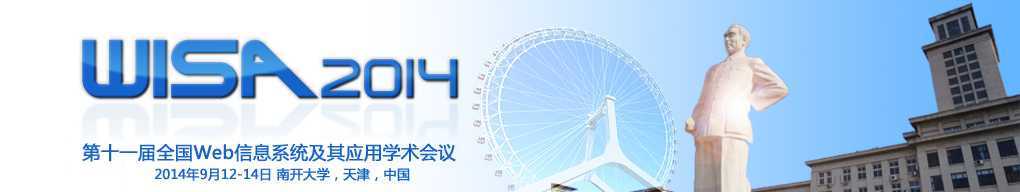
<style>
.page{position:relative;width:1020px;height:192px;background:#ffffff}
.page>*{position:absolute;margin:0}
.t1{font:13px/20px "MicrosoftYaHei";letter-spacing:0.001em;color:#1663cd;font-weight:bold}
.t2{font:18px/18px "MicrosoftYaHei";letter-spacing:0.001em;color:#1663cd;font-weight:bold}
</style>
<div class="page">
<p class="t1" style="left:82px;top:143px;width:374px;height:38px"><span class="t2">第十一届全国Web信息系统及其应用学术会议<br>  </span>2014年9月12-14日 南开大学，天津，中国</p>
</div>
